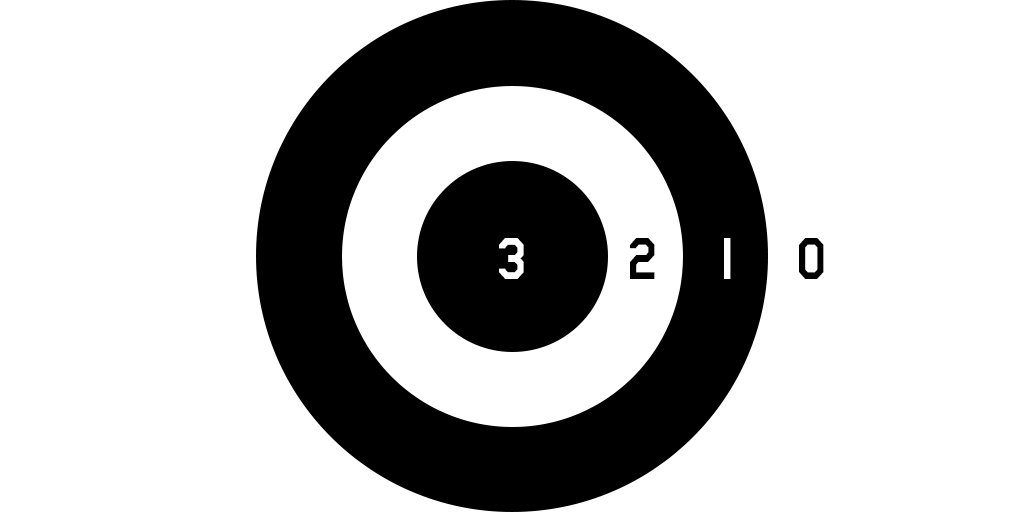
<style>
.page{position:relative;width:1024px;height:512px;background:#ffffff}
.page>*{position:absolute;margin:0}
.t1{font:68.3px "AmarilloUSAF";color:#ffffff;scale:0.9 1}
.t2{font:68.5px "AmarilloUSAF";color:#000000;scale:0.89 1}
.t3{font:68.5px "AmarilloUSAF";color:#ffffff;scale:0.89 1}
</style>
<div class="page">
<p class="t1" style="left:499px;top:238px;width:25px;height:41px">3</p>
<p class="t2" style="left:630px;top:238px;width:25px;height:41px">2</p>
<p class="t3" style="left:724px;top:238px;width:7px;height:41px">1</p>
<p class="t2" style="left:799px;top:238px;width:25px;height:41px">0</p>
</div>
